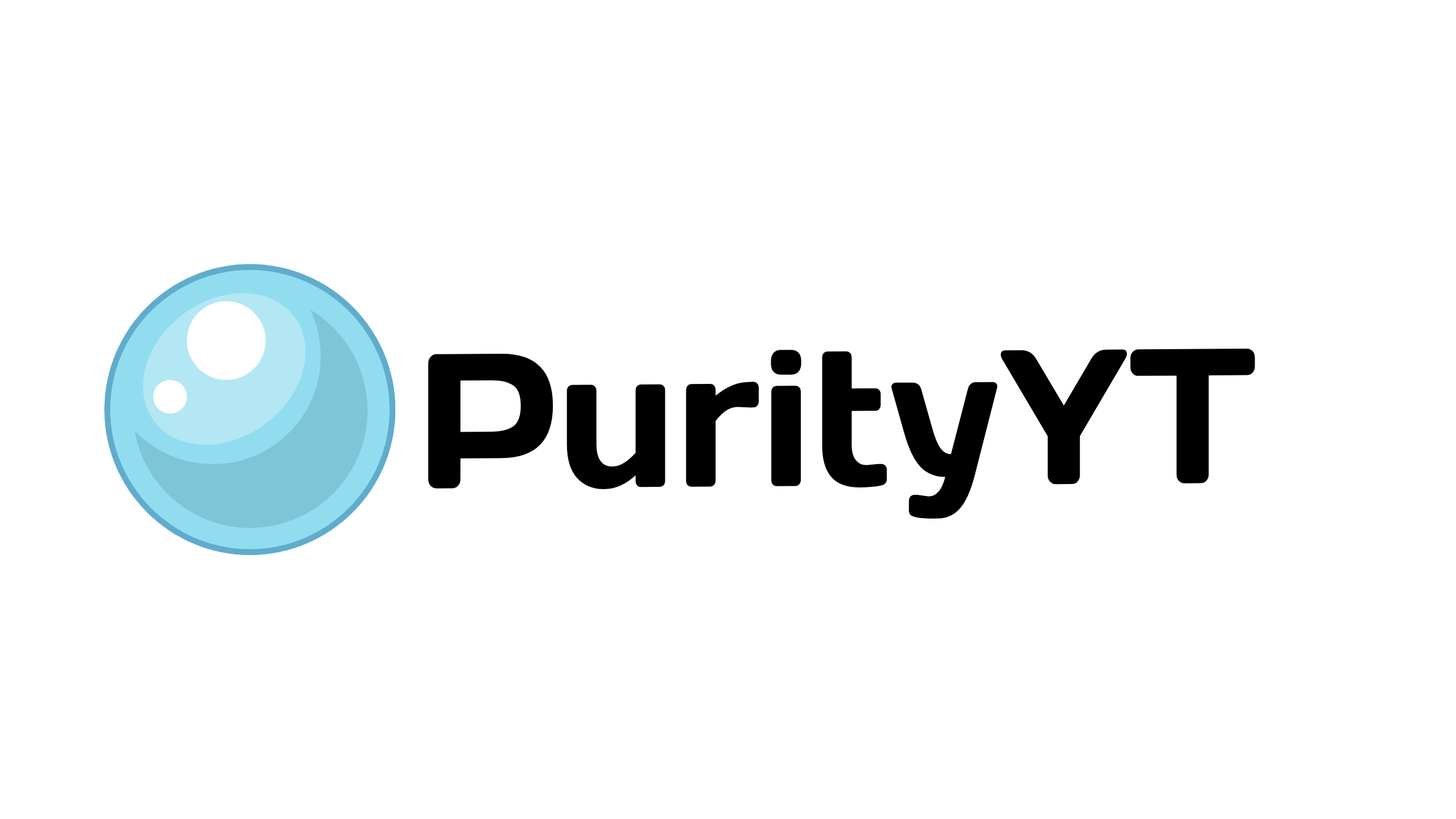
<style>
.page{position:relative;width:1456px;height:819px;background:#ffffff}
.page>*{position:absolute;margin:0}
.t1{font:191.7px "DaysOne-Regular";color:#000000;scale:0.91 1}
</style>
<div class="page">
<p class="t1" style="left:428px;top:349px;width:827px;height:170px">PurityYT</p>
</div>
